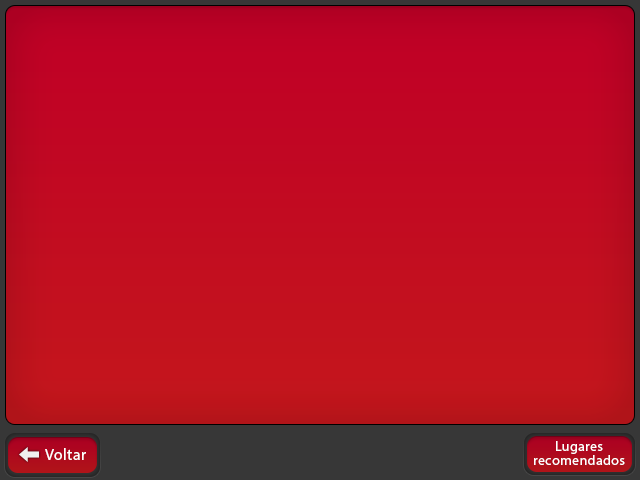
<style>
.page{position:relative;width:640px;height:480px}
.page>*{position:absolute;margin:0}
.t1{font:16px "MyriadPro-Regular";letter-spacing:0.02em;color:#ffffff}
.t2{font:14px/14px "MyriadPro-Regular";letter-spacing:0.02em;color:#ffffff}
</style>
<div class="page">
<p class="t1" style="left:45px;top:448px;width:41px;height:12px">Voltar</p>
<p class="t2" style="left:534px;top:441px;width:91px;height:24px;text-align:center">Lugares recomendados</p>
</div>
